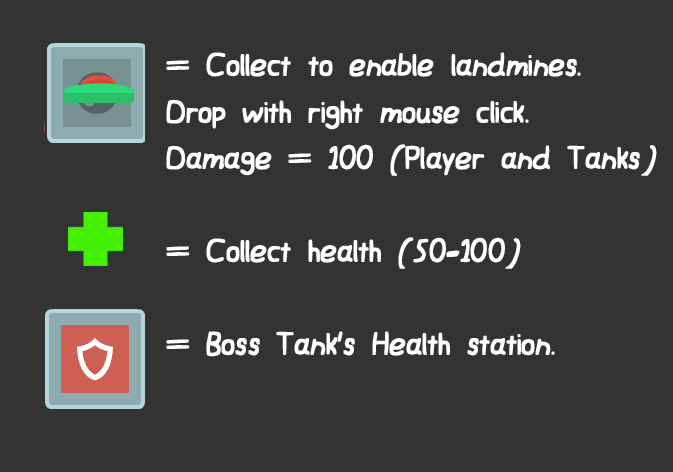
<style>
.page{position:relative;width:673px;height:472px;background:#333333}
.page>*{position:absolute;margin:0}
.t1{font:38.8px "JWerd";color:#ffffff}
</style>
<div class="page">
<p class="t1" style="left:166px;top:52px;width:491px;height:305px">= Collect to enable landmines.<br>Drop with right mouse click. <br>Damage = 100 (Player and Tanks)<br><br>= Collect health (50-100)<br><br>= Boss Tank’s Health station.</p>
</div>
